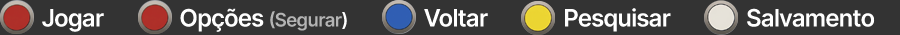
<style>
.page{position:relative;width:900px;height:35px;background:#333333}
.page>*{position:absolute;margin:0}
.t1{font:24px "InterTight-SemiBold";color:#ffffff}
.t2{font:18.7px "InterTight-SemiBold";color:#b4b4b4}
.t3{font:18.7px "InterTight-SemiBold";color:#ffffff}
</style>
<div class="page">
<p class="t1" style="left:42px;top:8px;width:833px;height:24px">Jogar               Opções <span class="t2">(Segurar</span><span class="t3">)</span>               Voltar               Pesquisar               Salvamento</p>
</div>
